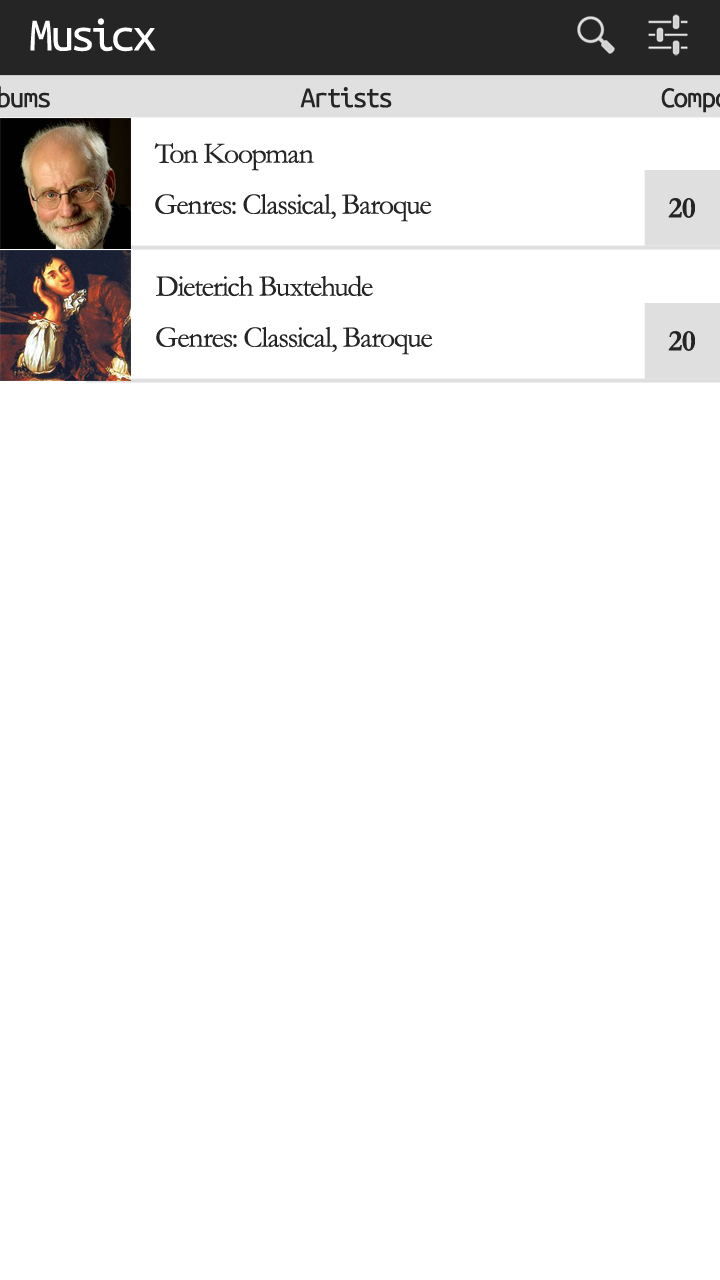
<style>
.page{position:relative;width:720px;height:1280px;background:#ffffff}
.page>*{position:absolute;margin:0}
.t1{font:48px "UbuntuMono-Regular";letter-spacing:-0.04em;color:#ffffff}
.t2{font:30px "UbuntuMono-Regular";letter-spacing:-0.04em;color:#252525}
.t3{font:30px "Garamond";letter-spacing:-0.04em;color:#252525}
.t4{font:30px "Garamond-Bold";letter-spacing:-0.04em;color:#252525}
</style>
<div class="page">
<p class="t1" style="left:30px;top:18px;width:126px;height:34px">Musicx</p>
<p class="t2" style="left:300px;top:87px;width:92px;height:21px">Artists</p>
<p class="t3" style="left:154px;top:143px;width:160px;height:28px">Ton Koopman</p>
<p class="t3" style="left:155px;top:194px;width:277px;height:28px">Genres: Classical, Baroque</p>
<p class="t4" style="left:668px;top:198px;width:27px;height:20px">20</p>
<p class="t3" style="left:156px;top:275px;width:217px;height:22px">Dieterich Buxtehude</p>
<p class="t3" style="left:156px;top:327px;width:277px;height:28px">Genres: Classical, Baroque</p>
<p class="t4" style="left:668px;top:331px;width:27px;height:20px">20</p>
</div>
